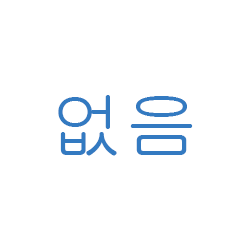
<style>
.page{position:relative;width:250px;height:250px;background:#ffffff}
.page>*{position:absolute;margin:0}
.t1{font:75px "Gulim";color:#337ac1;font-variant:small-caps}
</style>
<div class="page">
<p class="t1" style="left:58px;top:95px;width:135px;height:61px">없음</p>
</div>
